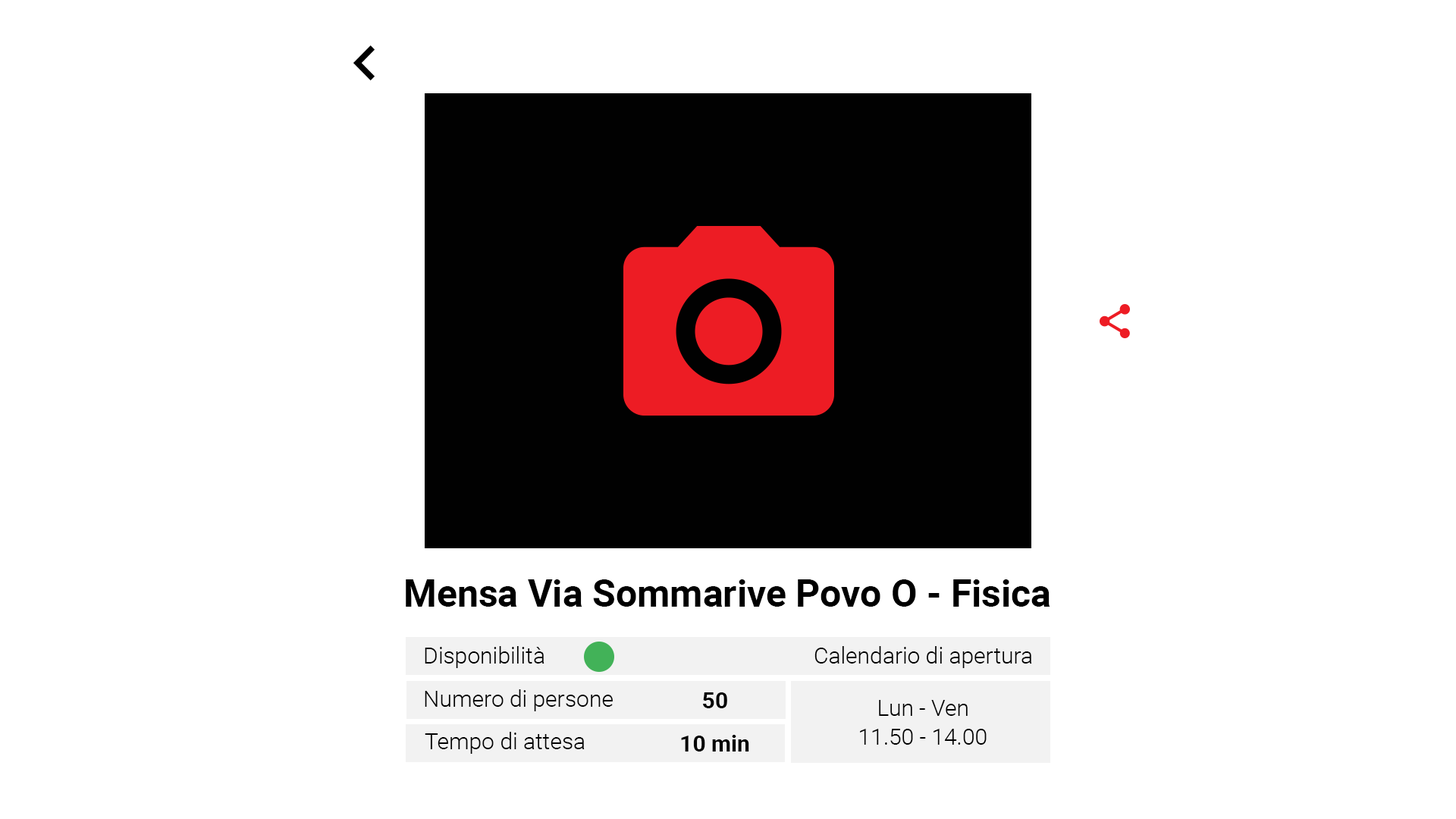
<style>
.page{position:relative;width:1456px;height:819px;background:#ffffff}
.page>*{position:absolute;margin:0}
.t1{font:37.9px "Roboto-Bold";color:#000000}
.t2{font:22.7px "Roboto-Light";color:#000000}
.t3{font:22.7px "Roboto-Bold";color:#000000}
</style>
<div class="page">
<p class="t1" style="left:406px;top:579px;width:644px;height:28px">Mensa Via Sommarive Povo O - Fisica</p>
<p class="t2" style="left:425px;top:646px;width:119px;height:22px">Disponibilità</p>
<p class="t2" style="left:814px;top:646px;width:218px;height:22px">Calendario di apertura</p>
<p class="t2" style="left:425px;top:689px;width:188px;height:22px">Numero di persone</p>
<p class="t3" style="left:703px;top:692px;width:24px;height:16px">50</p>
<p class="t2" style="left:879px;top:700px;width:89px;height:16px">Lun - Ven</p>
<p class="t2" style="left:425px;top:732px;width:160px;height:22px">Tempo di attesa</p>
<p class="t3" style="left:681px;top:735px;width:68px;height:16px">10 min</p>
<p class="t2" style="left:860px;top:729px;width:127px;height:16px">11.50 - 14.00</p>
</div>
